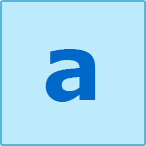
<style>
.page{position:relative;width:146px;height:146px;background:#beebfc}
.page>*{position:absolute;margin:0}
.t1{font:90px "Verdana-Bold";color:#0068c9}
</style>
<div class="page">
<p class="t1" style="left:45px;top:49px;width:51px;height:53px">a</p>
</div>
